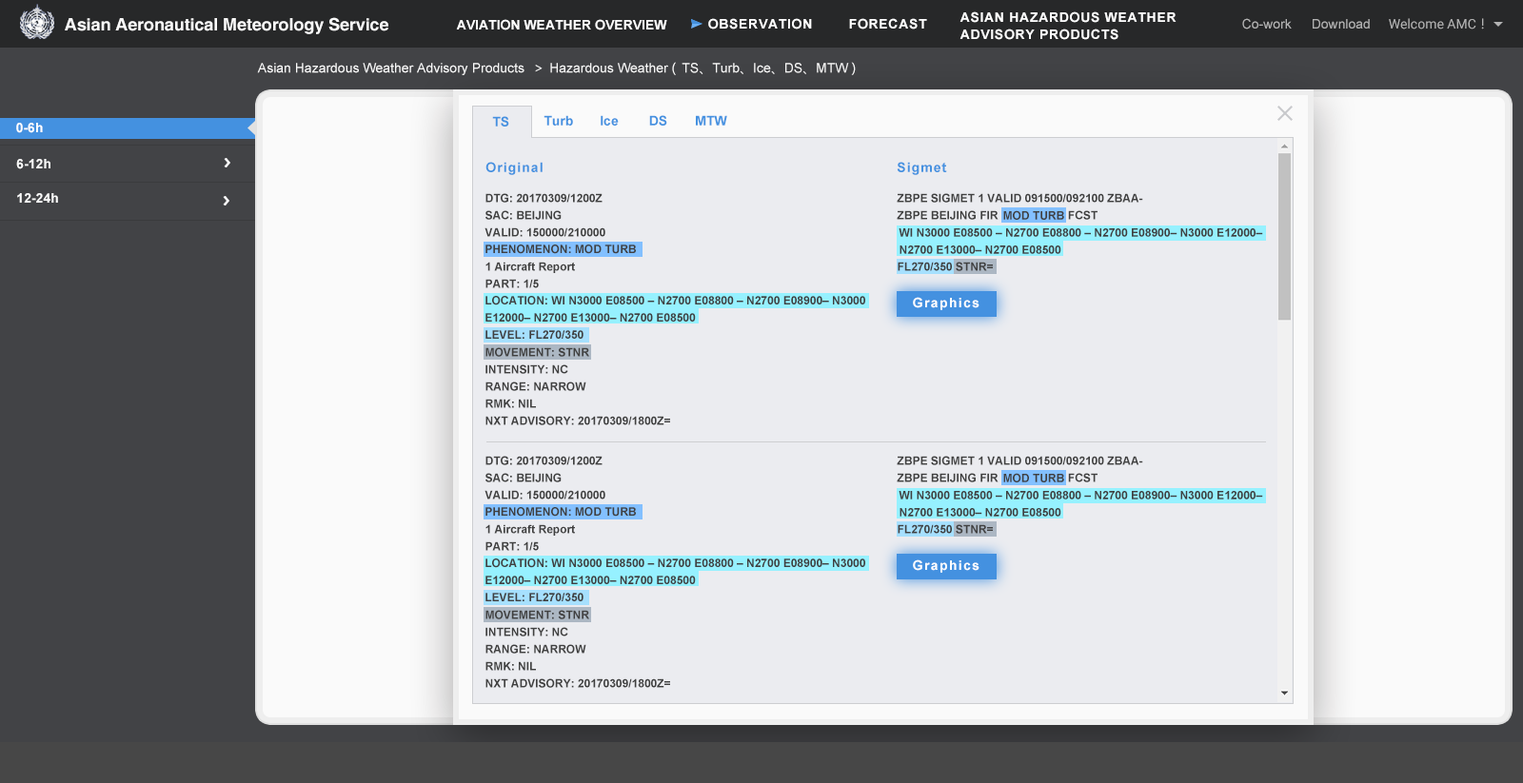
<style>
.page{position:relative;width:1523px;height:783px;background:#ebecf0}
.page>*{position:absolute;margin:0}
.t1{font:17.1px "Helvetica-Bold";letter-spacing:-0.005em;color:#fafafa}
.t2{font:13.3px/17.1px "Arial-BoldMT";letter-spacing:0.05em;color:#ffffff}
.t3{font:13.3px "Arial-BoldMT";color:#ffffff}
.t4{font:13.3px "Arial-BoldMT";letter-spacing:0.05em;color:#ffffff}
.t5{font:13.3px "ArialMT";color:#b3b3b3}
.t6{font:13.3px "Roboto-Regular";color:#b3b3b3}
.t7{font:13.3px "MicrosoftYaHei";color:#b3b3b3}
.t8{font:13.3px "ArialMT";color:#ffffff}
.t9{font:13.3px "MicrosoftYaHei";letter-spacing:0.07em;color:#0d2a5b}
.t10{font:13.3px "ArialMT";color:#0d2a5b}
.t11{font:13.3px "MicrosoftYaHei";color:#0d2a5b}
.t12{font:13.3px "Arial-BoldMT";color:#4491e0}
.t13{font:13.3px "Arial-BoldMT";color:#fafafa}
.t14{font:13.3px "Arial-BoldMT";letter-spacing:0.075em;color:#4491e0}
.t15{font:11.4px/17.1px "Arial-BoldMT";color:#404040}
.t16{font:11.4px "Arial-BoldMT";color:#404040}
.t17{font:13.3px "Arial-BoldMT";letter-spacing:0.1em;color:#ffffff}
</style>
<div class="page">
<p class="t1" style="left:65px;top:17px;width:323px;height:17px">Asian Aeronautical Meteorology Service</p>
<p class="t2" style="left:959px;top:11px;width:217px;height:29px">ASIAN HAZARDOUS WEATHER<br>ADVISORY PRODUCTS</p>
<p class="t3" style="left:456px;top:19px;width:211px;height:11px">AVIATION WEATHER OVERVIEW</p>
<p class="t4" style="left:708px;top:18px;width:104px;height:11px">OBSERVATION</p>
<p class="t4" style="left:849px;top:18px;width:78px;height:11px">FORECAST</p>
<p class="t5" style="left:1242px;top:18px;width:49px;height:11px">Co-work</p>
<p class="t5" style="left:1312px;top:19px;width:57px;height:10px">Download</p>
<p class="t6" style="left:1388px;top:18px;width:96px;height:11px">Welcome AMC<span class="t7">！</span></p>
<p class="t8" style="left:257px;top:62px;width:598px;height:13px">Asian Hazardous Weather Advisory Products <span class="t9"> &gt; </span>Hazardous Weather <span class="t9">( </span><span class="t10">TS</span><span class="t11">、</span><span class="t10">Turb</span><span class="t11">、</span><span class="t10">Ice</span><span class="t11">、</span><span class="t10">DS</span><span class="t11">、</span><span class="t10">MTW </span><span class="t9">)</span></p>
<p class="t3" style="left:16px;top:123px;width:27px;height:10px">0-6h</p>
<p class="t12" style="left:492px;top:116px;width:17px;height:11px">TS</p>
<p class="t12" style="left:543px;top:115px;width:30px;height:11px">Turb</p>
<p class="t12" style="left:600px;top:115px;width:19px;height:11px">Ice</p>
<p class="t12" style="left:649px;top:115px;width:18px;height:11px">DS</p>
<p class="t12" style="left:696px;top:115px;width:31px;height:11px">MTW</p>
<p class="t13" style="left:16px;top:159px;width:34px;height:10px">6-12h</p>
<p class="t14" style="left:485px;top:162px;width:57px;height:13px">Original</p>
<p class="t14" style="left:896px;top:162px;width:51px;height:13px">Sigmet</p>
<p class="t13" style="left:17px;top:193px;width:41px;height:10px">12-24h</p>
<p class="t15" style="left:484px;top:193px;width:186px;height:232px">DTG: 20170309/1200Z<br>SAC: BEIJING<br>VALID: 150000/210000<br><br>1 Aircraft Report<br>PART: 1/5<br><br><br><br>MOVEMENT: STNR<br>INTENSITY: NC<br>RANGE: NARROW<br>RMK: NIL<br>NXT ADVISORY: 20170309/1800Z=</p>
<p class="t15" style="left:896px;top:193px;width:247px;height:78px">ZBPE SIGMET 1 VALID 091500/092100 ZBAA-<br>ZBPE BEIJING FIR                      FCST<br><br><br>FL270/350 STNR=</p>
<p class="t16" style="left:1003px;top:210px;width:61px;height:10px">MOD TURB</p>
<p class="t15" style="left:898px;top:228px;width:365px;height:26px">WI N3000 E08500 – N2700 E08800 – N2700 E08900– N3000 E12000– <br>N2700 E13000– N2700 E08500</p>
<p class="t16" style="left:485px;top:245px;width:151px;height:9px">PHENOMENON: MOD TURB</p>
<p class="t15" style="left:485px;top:296px;width:380px;height:26px">LOCATION: WI N3000 E08500 – N2700 E08800 – N2700 E08900– N3000<br>E12000– N2700 E13000– N2700 E08500</p>
<p class="t17" style="left:913px;top:297px;width:66px;height:13px">Graphics</p>
<p class="t16" style="left:485px;top:330px;width:98px;height:9px">LEVEL: FL270/350</p>
<p class="t15" style="left:484px;top:456px;width:186px;height:232px">DTG: 20170309/1200Z<br>SAC: BEIJING<br>VALID: 150000/210000<br><br>1 Aircraft Report<br>PART: 1/5<br><br><br><br>MOVEMENT: STNR<br>INTENSITY: NC<br>RANGE: NARROW<br>RMK: NIL<br>NXT ADVISORY: 20170309/1800Z=</p>
<p class="t15" style="left:896px;top:456px;width:247px;height:78px">ZBPE SIGMET 1 VALID 091500/092100 ZBAA-<br>ZBPE BEIJING FIR                      FCST<br><br><br>FL270/350 STNR=</p>
<p class="t16" style="left:1003px;top:473px;width:61px;height:9px">MOD TURB</p>
<p class="t15" style="left:898px;top:491px;width:365px;height:26px">WI N3000 E08500 – N2700 E08800 – N2700 E08900– N3000 E12000– <br>N2700 E13000– N2700 E08500</p>
<p class="t16" style="left:485px;top:507px;width:151px;height:10px">PHENOMENON: MOD TURB</p>
<p class="t15" style="left:485px;top:559px;width:380px;height:25px">LOCATION: WI N3000 E08500 – N2700 E08800 – N2700 E08900– N3000<br>E12000– N2700 E13000– N2700 E08500</p>
<p class="t17" style="left:913px;top:560px;width:66px;height:13px">Graphics</p>
<p class="t16" style="left:485px;top:593px;width:98px;height:8px">LEVEL: FL270/350</p>
</div>
